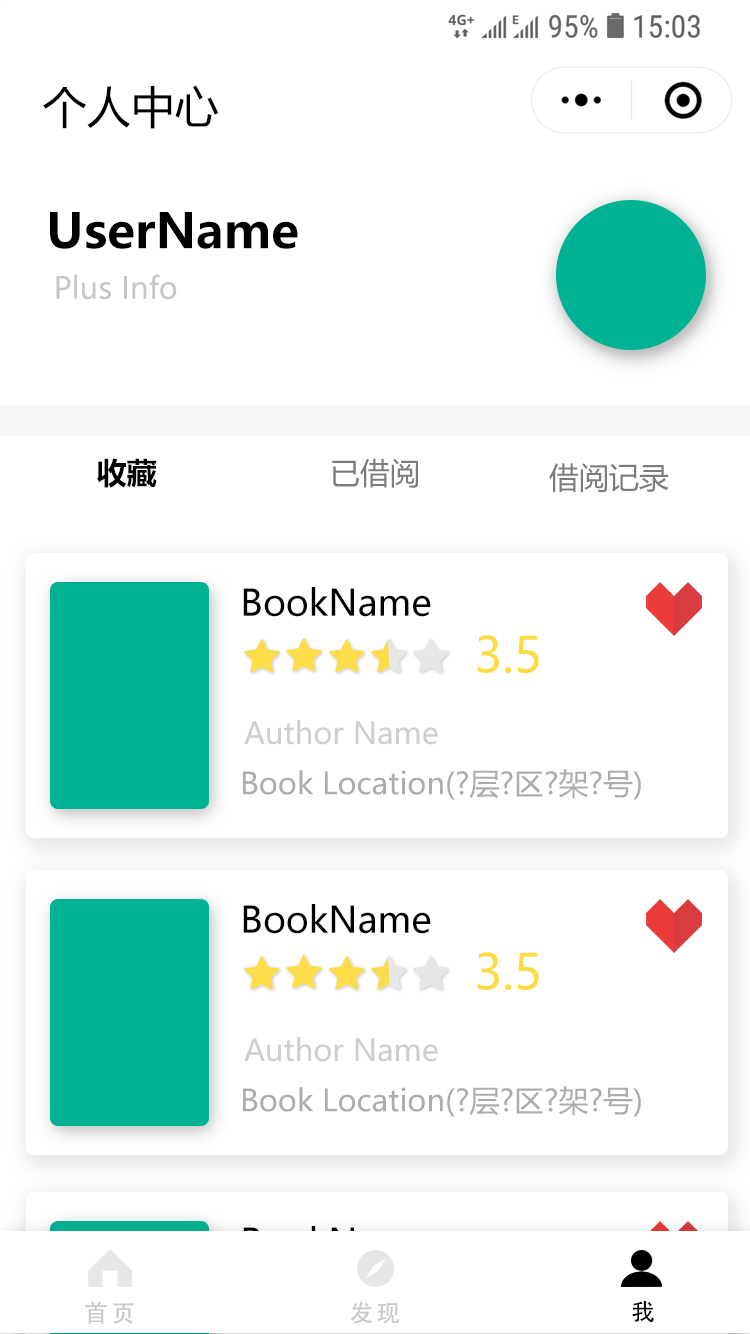
<style>
.page{position:relative;width:750px;height:1334px;background:#ffffff}
.page>*{position:absolute;margin:0}
.t1{font:44px "MicrosoftYaHeiUI";color:#000000}
.t2{font:48px "MicrosoftYaHeiUI-Bold";color:#000000}
.t3{font:30px "MicrosoftYaHeiUI";color:#c6c6c6}
.t4{font:30px "MicrosoftYaHeiUI-Bold";color:#000000}
.t5{font:30px "MicrosoftYaHeiUI";color:#7c7c7c}
.t6{font:36px "MicrosoftYaHeiUI";color:#000000}
.t7{font:48.6px "MicrosoftYaHeiUI";color:#ffdb42}
.t8{font:30.1px "MicrosoftYaHeiUI";color:#cecece}
.t9{font:30.1px "MicrosoftYaHeiUI";color:#acacac}
.t10{font:24.1px "AdobeHeitiStd-Regular";letter-spacing:0.12em;color:#c8c8c8}
.t11{font:24.1px "AdobeHeitiStd-Regular";letter-spacing:0.12em;color:#000000}
</style>
<div class="page">
<p class="t1" style="left:43px;top:85px;width:176px;height:44px">个人中心</p>
<p class="t2" style="left:50px;top:212px;width:248px;height:37px">UserName</p>
<p class="t3" style="left:56px;top:274px;width:121px;height:26px">Plus Info</p>
<p class="t4" style="left:97px;top:458px;width:60px;height:30px">收藏</p>
<p class="t5" style="left:332px;top:458px;width:86px;height:30px">已借阅</p>
<p class="t5" style="left:549px;top:463px;width:120px;height:30px">借阅记录</p>
<p class="t6" style="left:243px;top:587px;width:188px;height:30px">BookName</p>
<p class="t7" style="left:477px;top:635px;width:62px;height:39px">3.5</p>
<p class="t8" style="left:244px;top:720px;width:194px;height:25px">Author Name</p>
<p class="t9" style="left:243px;top:769px;width:398px;height:31px">Book Location(?层?区?架?号)</p>
<p class="t6" style="left:243px;top:904px;width:188px;height:30px">BookName</p>
<p class="t7" style="left:477px;top:952px;width:62px;height:39px">3.5</p>
<p class="t8" style="left:244px;top:1037px;width:194px;height:25px">Author Name</p>
<p class="t9" style="left:243px;top:1086px;width:398px;height:31px">Book Location(?层?区?架?号)</p>
<p class="t10" style="left:85px;top:1301px;width:49px;height:23px">首页</p>
<p class="t10" style="left:350px;top:1302px;width:50px;height:22px">发现</p>
<p class="t11" style="left:632px;top:1300px;width:22px;height:23px">我</p>
</div>
